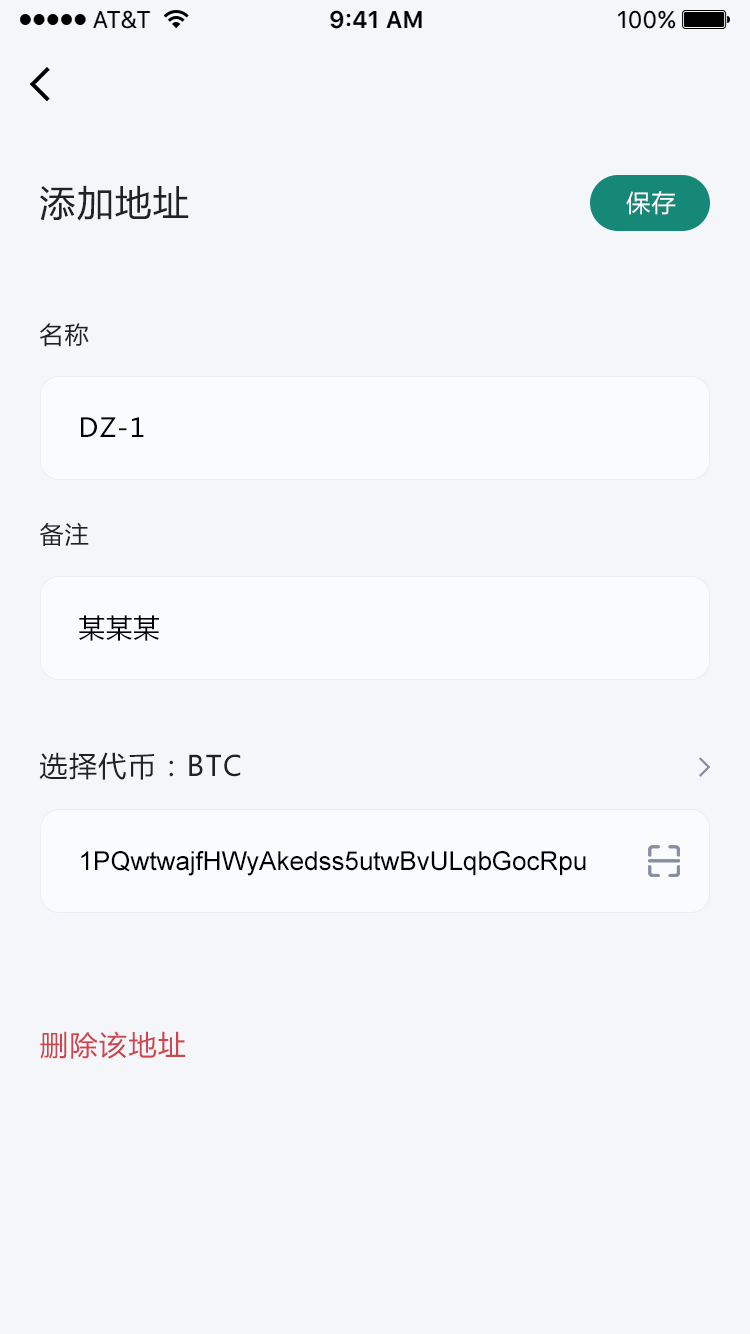
<style>
.page{position:relative;width:750px;height:1334px;background:#f5f6fa}
.page>*{position:absolute;margin:0}
.t1{font:36px "MicrosoftYaHei";letter-spacing:0.05em;color:#222222}
.t2{font:24px "MicrosoftYaHei";letter-spacing:0.05em;color:#ffffff}
.t3{font:24px "MicrosoftYaHei";letter-spacing:0.05em;color:#222222}
.t4{font:26px "MicrosoftYaHei";letter-spacing:0.05em;color:#000000}
.t5{font:28px "MicrosoftYaHei";letter-spacing:0.05em;color:#222222}
.t6{font:26px "ArialMT";color:#000000}
.t7{font:28px "MicrosoftYaHei";letter-spacing:0.05em;color:#cd464d}
</style>
<div class="page">
<p class="t1" style="left:40px;top:185px;width:149px;height:36px">添加地址</p>
<p class="t2" style="left:626px;top:191px;width:50px;height:24px">保存</p>
<p class="t3" style="left:39px;top:323px;width:50px;height:24px">名称</p>
<p class="t4" style="left:81px;top:417px;width:63px;height:20px">DZ-1</p>
<p class="t3" style="left:39px;top:522px;width:50px;height:24px">备注</p>
<p class="t4" style="left:79px;top:615px;width:80px;height:26px">某某某</p>
<p class="t5" style="left:39px;top:752px;width:202px;height:28px">选择代币：BTC</p>
<p class="t6" style="left:81px;top:851px;width:505px;height:25px">1PQwtwajfHWyAkedss5utwBvULqbGocRpu</p>
<p class="t7" style="left:40px;top:1031px;width:146px;height:28px">删除该地址</p>
</div>
